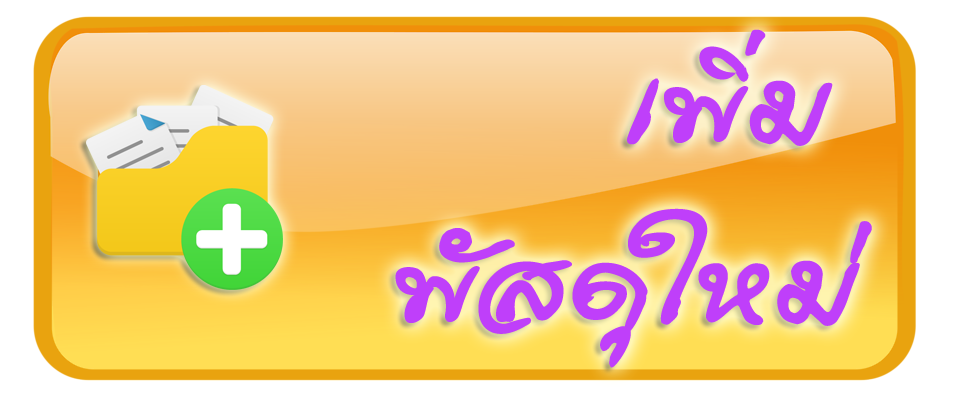
<style>
.page{position:relative;width:958px;height:395px}
.page>*{position:absolute;margin:0}
.t1{font:150px "FontNongnam-Bold";color:#bf3ffa}
</style>
<div class="page">
<p class="t1" style="left:395px;top:29px;width:477px;height:339px">เพิ่ม<br>พัสดุใหม่</p>
</div>
